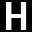
<style>
.page{position:relative;width:32px;height:32px;background:#000000}
.page>*{position:absolute;margin:0}
.t1{font:44px "Consolas-Bold";color:#ffffff}
</style>
<div class="page">
<p class="t1" style="left:6px;top:2px;width:21px;height:28px">H</p>
</div>
